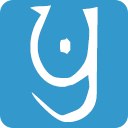
<style>
.page{position:relative;width:128px;height:128px;background:#3399cc}
.page>*{position:absolute;margin:0}
.t1{font:128px "NockerCranky";color:#ffffff}
</style>
<div class="page">
<p class="t1" style="left:30px;top:5px;width:68px;height:117px">Y</p>
</div>
